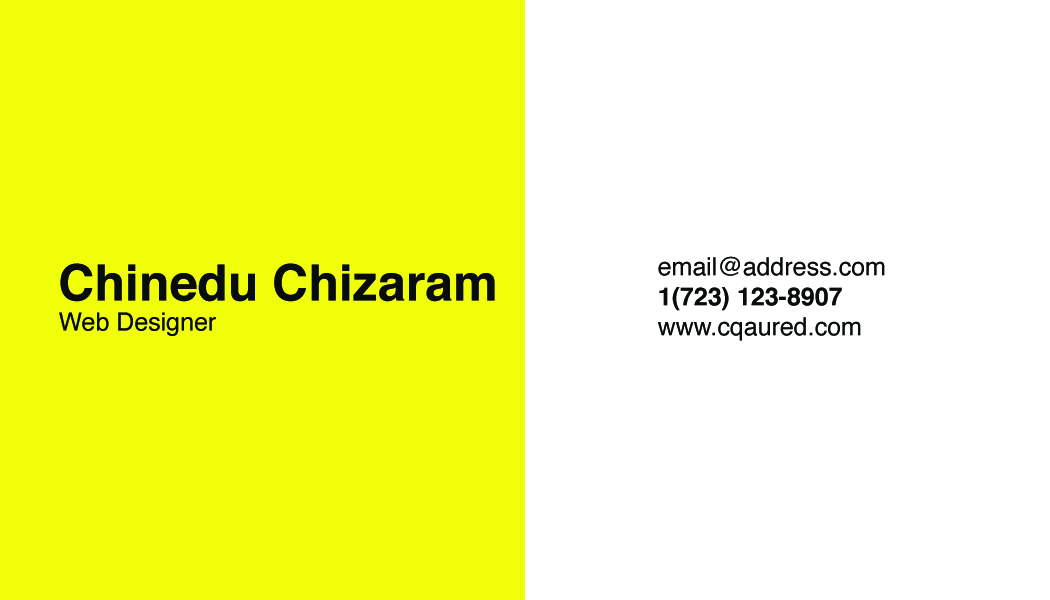
<style>
.page{position:relative;width:1050px;height:600px;background:#ffffff}
.page>*{position:absolute;margin:0}
.t1{font:25px "Helvetica";color:#090c0c}
.t2{font:25px "Helvetica-Bold";color:#090c0c}
.t3{font:12px "Helvetica-Bold";color:#090c0c}
</style>
<div class="page">
<p class="t1" style="left:658px;top:256px;width:227px;height:85px">email@address.com<br><span class="t2">1(723) 123-8907<br></span>www.cqaured.com</p>
<p class="t3" style="left:59px;top:263px;width:436px;height:73px">Chinedu Chizaram<br><span class="t1">Web Designer</span></p>
</div>
